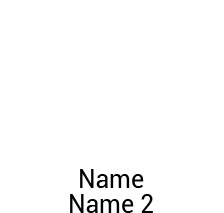
<style>
.page{position:relative;width:224px;height:213px;background:#ffffff}
.page>*{position:absolute;margin:0}
.t1{font:24.8px "Roboto-Regular";color:#000000}
</style>
<div class="page">
<p class="t1" style="left:80px;top:169px;width:64px;height:19px">Name</p>
<p class="t1" style="left:70px;top:194px;width:83px;height:19px">Name 2</p>
</div>
